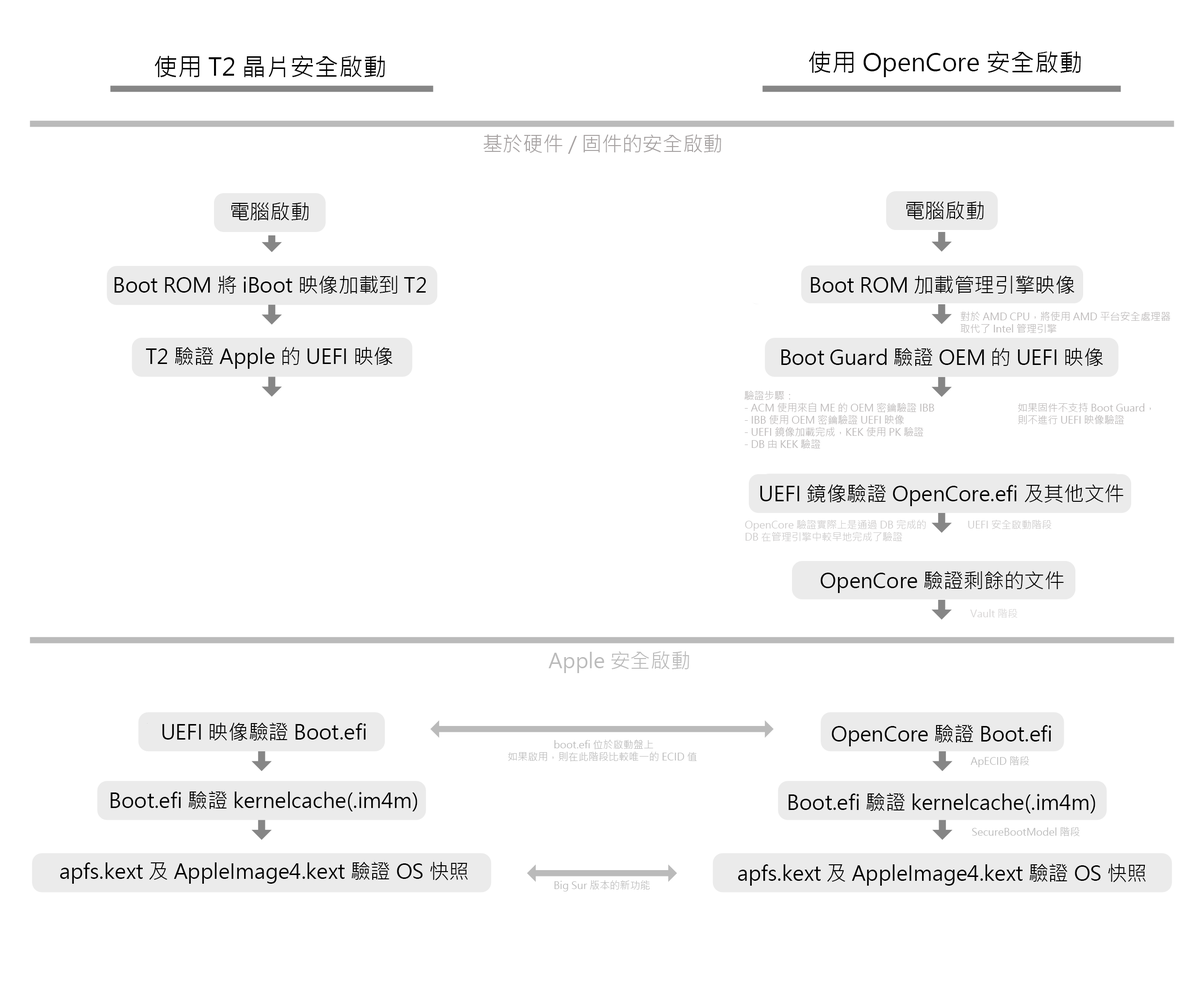
<style>
.page{position:relative;width:1204px;height:990px;background:#ffffff}
.page>*{position:absolute;margin:0}
.t1{font:5.8px "MicrosoftJhengHeiRegular";color:#000000}
.t2{font:20.2px "MicrosoftJhengHeiRegular";color:#a6a2a2}
.t3{font:20.2px "MicrosoftJhengHeiRegular";color:#000000}
.t4{font:10.1px/12.1px "MicrosoftJhengHeiRegular";color:#bbb8b8}
.t5{font:10.1px/12.1px "MicrosoftJhengHeiRegular";color:#cbc9c9}
.t6{font:10.1px "MicrosoftJhengHeiRegular";color:#cbc9c9}
.t7{font:10.1px "MicrosoftJhengHeiRegular";color:#d7d5d5}
.t8{font:20.2px "MicrosoftJhengHeiRegular";color:#bababa}
.t9{font:10.1px/12.1px "MicrosoftJhengHeiRegular";color:#bababa}
.t10{font:10.1px "MicrosoftJhengHeiRegular";color:#bababa}
</style>
<div class="page">
<p class="t1" style="left:809px;top:51px;width:272px;height:26px">使用 OpenCore 安全啟動</p>
<p class="t1" style="left:155px;top:55px;width:230px;height:22px">使用 T2 晶片安全啟動</p>
<p class="t2" style="left:483px;top:134px;width:238px;height:20px">基於硬件/固件的安全啟動</p>
<p class="t3" style="left:231px;top:202px;width:78px;height:18px">電腦啟動</p>
<p class="t3" style="left:906px;top:201px;width:78px;height:18px">電腦啟動</p>
<p class="t3" style="left:115px;top:276px;width:311px;height:18px">Boot ROM 將 iBoot 映像加載到T2</p>
<p class="t3" style="left:811px;top:276px;width:264px;height:18px">Boot ROM 加載管理引擎映像</p>
<p class="t4" style="left:961px;top:312px;width:210px;height:21px">對於 AMD CPU，將使用 AMD 平台安全處理器<br>取代了Intel管理引擎</p>
<p class="t3" style="left:146px;top:347px;width:247px;height:22px">T2 驗證 Apple 的 UEFI 映像</p>
<p class="t3" style="left:781px;top:348px;width:322px;height:18px">Boot Guard 驗證 OEM 的 UEFI 映像</p>
<p class="t4" style="left:745px;top:391px;width:189px;height:57px">驗證步驟：<br>- ACM 使用來自 ME 的 OEM 密鑰驗證 IBB<br>- IBB 使用 OEM 密鑰驗證 UEFI 映像<br>- UEFI鏡像加載完成，KEK使用PK驗證<br>- DB由KEK驗證</p>
<p class="t4" style="left:1018px;top:403px;width:133px;height:21px">如果固件不支持 Boot Guard，<br>則不進行 UEFI 映像驗證</p>
<p class="t3" style="left:760px;top:484px;width:364px;height:22px">UEFI 鏡像驗證 OpenCore.efi 及其他文件</p>
<p class="t5" style="left:745px;top:520px;width:181px;height:22px">OpenCore驗證實際上是通過 DB 完成的<br>DB 在管理引擎中較早地完成了驗證</p>
<p class="t6" style="left:968px;top:520px;width:84px;height:9px">UEFI 安全啟動階段</p>
<p class="t3" style="left:821px;top:571px;width:243px;height:22px">OpenCore 驗證剩餘的文件</p>
<p class="t7" style="left:970px;top:609px;width:48px;height:9px">Vault 階段</p>
<p class="t8" style="left:548px;top:651px;width:141px;height:22px">Apple 安全啟動</p>
<p class="t3" style="left:162px;top:723px;width:204px;height:18px">UEFI 映像驗證 Boot.efi</p>
<p class="t3" style="left:832px;top:725px;width:219px;height:22px">OpenCore驗證 Boot.efi</p>
<p class="t9" style="left:508px;top:740px;width:189px;height:22px;text-align:center">boot.efi 位於啟動盤上<br>如果啟用，則在此階段比較唯一的 ECID 值</p>
<p class="t10" style="left:971px;top:756px;width:59px;height:11px">ApECID階段</p>
<p class="t3" style="left:111px;top:791px;width:306px;height:21px">Boot.efi 驗證 kernelcache(.im4m)</p>
<p class="t3" style="left:789px;top:793px;width:307px;height:21px">Boot.efi 驗證 kernelcache(.im4m)</p>
<p class="t10" style="left:972px;top:827px;width:108px;height:9px">SecureBootModel 階段</p>
<p class="t3" style="left:60px;top:862px;width:408px;height:22px">apfs.kext 及 AppleImage4.kext 驗證 OS 快照</p>
<p class="t3" style="left:738px;top:864px;width:408px;height:22px">apfs.kext 及 AppleImage4.kext 驗證 OS 快照</p>
<p class="t10" style="left:554px;top:880px;width:96px;height:12px">Big Sur 版本的新功能</p>
</div>
